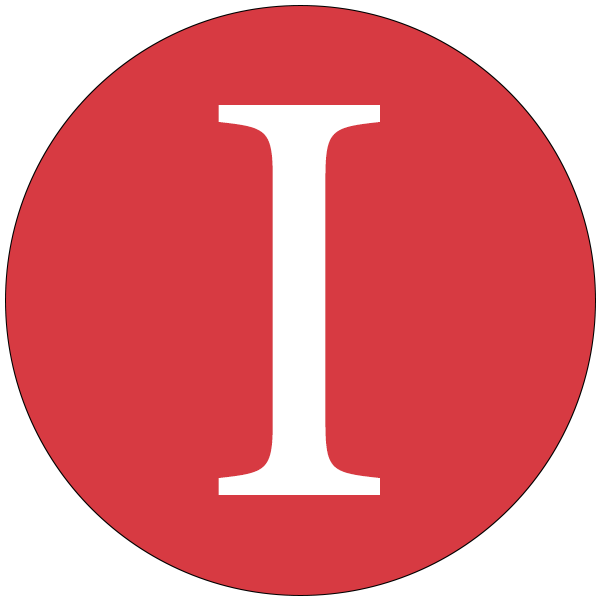
<style>
.page{position:relative;width:600px;height:600px;background:#d73a42}
.page>*{position:absolute;margin:0}
.t1{font:600px "MinionVariableConcept-Roman";letter-spacing:0.01em;color:#ffffff}
</style>
<div class="page">
<p class="t1" style="left:218px;top:105px;width:162px;height:390px">I</p>
</div>
